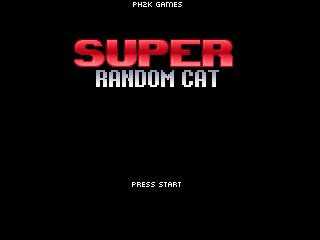
<style>
.page{position:relative;width:320px;height:240px;background:#000000}
.page>*{position:absolute;margin:0}
.t1{font:8px "PFArmaFive";color:#ffffff}
.t2{font:30px "8bitoperator-JVE"}
</style>
<div class="page">
<p class="t1" style="left:133px;top:2px;width:49px;height:5px">PH2K Games</p>
<p class="t2" style="left:96px;top:70px;width:123px;height:17px">RANDOM CAT</p>
<p class="t1" style="left:132px;top:182px;width:49px;height:5px">Press Start</p>
</div>
